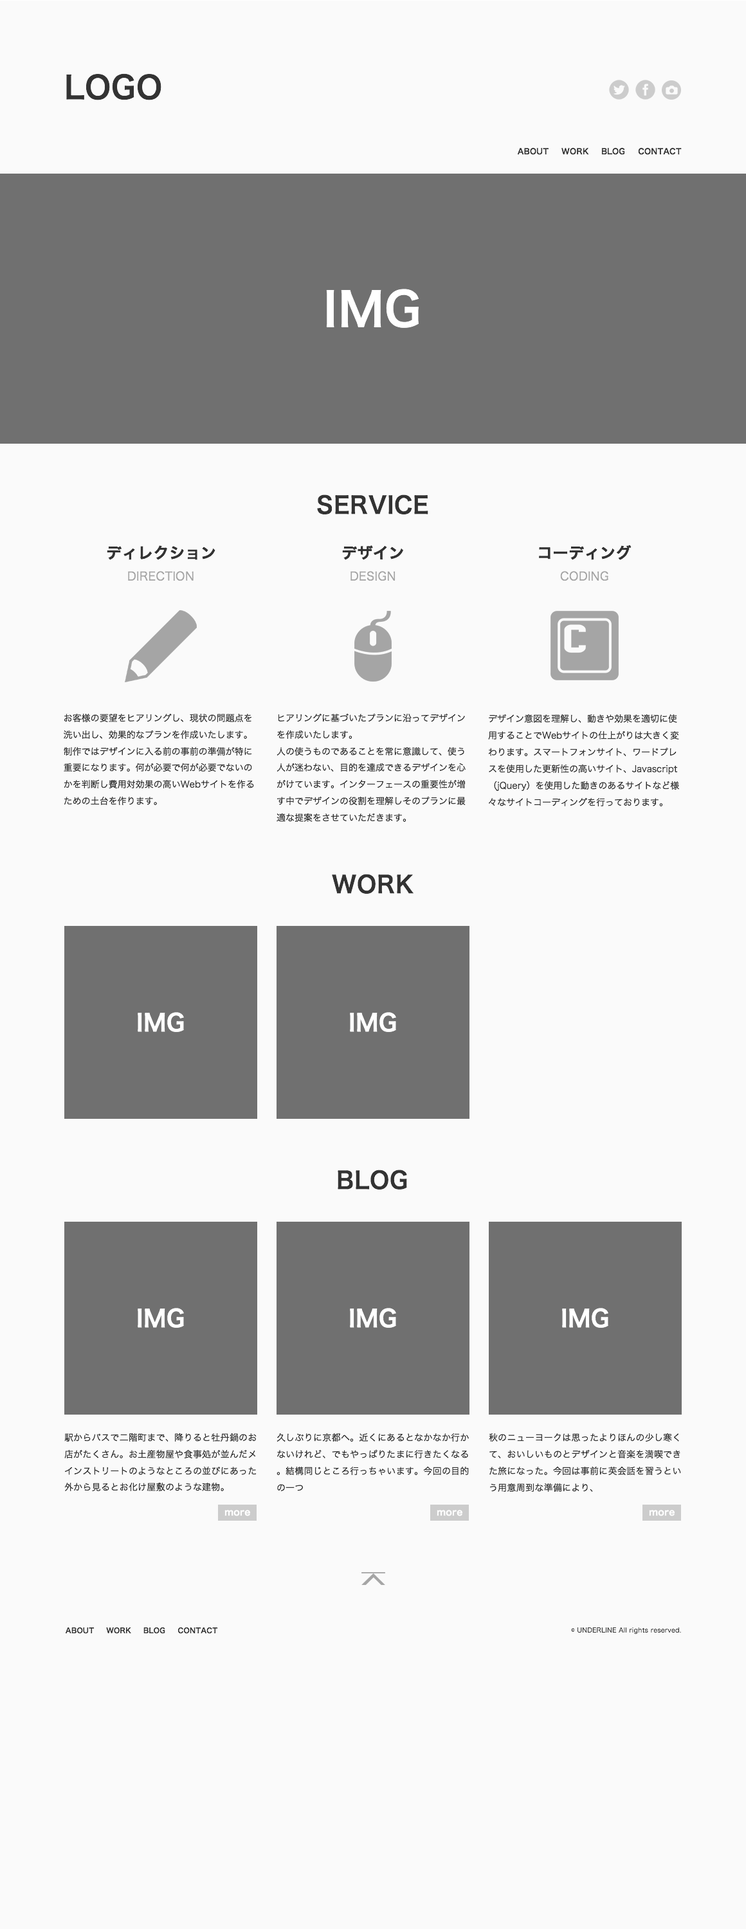
<style>
.page{position:relative;width:746px;height:1929px;background:#fafafa}
.page>*{position:absolute;margin:0}
.t1{font:30.9px "HiraKakuPro-W6";letter-spacing:0.02em;color:#333333}
.t2{font:7.7px "HiraKakuPro-W6";letter-spacing:0.02em;color:#333333}
.t3{font:46.3px "HiraKakuPro-W6";letter-spacing:0.02em;color:#ffffff}
.t4{font:23.1px "HiraKakuPro-W6";letter-spacing:0.02em;color:#333333}
.t5{font:15.4px "HiraKakuPro-W6";letter-spacing:0.02em;color:#333333}
.t6{font:11.6px "HiraKakuPro-W3";letter-spacing:0.02em;color:#a5a5a5}
.t7{font:9px "HiraKakuPro-W3";color:#333333}
.t8{font:9px "HiraKakuPro-W3";letter-spacing:0.02em;color:#333333}
.t9{font:7.1px "HiraKakuPro-W6";letter-spacing:0.02em;color:#333333}
.t10{font:6.4px "HiraKakuPro-W3";letter-spacing:0.02em;color:#333333}
</style>
<div class="page">
<p class="t1" style="left:66px;top:73px;width:95px;height:27px">LOGO</p>
<p class="t2" style="left:517px;top:148px;width:31px;height:7px">ABOUT</p>
<p class="t2" style="left:561px;top:148px;width:28px;height:7px">WORK</p>
<p class="t2" style="left:601px;top:148px;width:24px;height:7px">BLOG</p>
<p class="t2" style="left:638px;top:148px;width:43px;height:7px">CONTACT</p>
<p class="t3" style="left:326px;top:289px;width:93px;height:39px">IMG</p>
<p class="t4" style="left:317px;top:494px;width:111px;height:20px">SERVICE</p>
<p class="t5" style="left:107px;top:545px;width:108px;height:15px">ディレクション</p>
<p class="t5" style="left:342px;top:545px;width:61px;height:15px">デザイン</p>
<p class="t5" style="left:539px;top:544px;width:92px;height:16px">コーディング</p>
<p class="t6" style="left:128px;top:571px;width:66px;height:10px">DIRECTION</p>
<p class="t6" style="left:350px;top:571px;width:45px;height:10px">DESIGN</p>
<p class="t6" style="left:560px;top:571px;width:48px;height:10px">CODING</p>
<p class="t7" style="left:64px;top:713px;width:190px;height:93px">お客様の要望をヒアリングし、現状の問題点を洗い出し、効果的なプランを作成いたします。制作ではデザインに入る前の事前の準備が特に重要になります。何が必要で何が必要でないのかを判断し費用対効果の高いWebサイトを作るための土台を作ります。</p>
<p class="t7" style="left:276px;top:713px;width:189px;height:109px">ヒアリングに基づいたプランに沿ってデザインを作成いたします。<br>人の使うものであることを常に意識して、使う人が迷わない、目的を達成できるデザインを心がけています。インターフェースの重要性が増す中でデザインの役割を理解しそのプランに最適な提案をさせていただきます。</p>
<p class="t7" style="left:488px;top:714px;width:191px;height:92px">デザイン意図を理解し、動きや効果を適切に使用することでWebサイトの仕上がりは大きく変わります。スマートフォンサイト、ワードプレスを使用した更新性の高いサイト、Javascript（jQuery）を使用した動きのあるサイトなど様々なサイトコーディングを行っております。</p>
<p class="t4" style="left:332px;top:874px;width:81px;height:20px">WORK</p>
<p class="t4" style="left:338px;top:1169px;width:69px;height:20px">BLOG</p>
<p class="t8" style="left:64px;top:1432px;width:192px;height:59px">駅からバスで二階町まで、降りると牡丹鍋のお店がたくさん。お土産物屋や食事処が並んだメインストリートのようなところの並びにあった外から見るとお化け屋敷のような建物。</p>
<p class="t8" style="left:276px;top:1432px;width:193px;height:59px">久しぶりに京都へ。近くにあるとなかなか行かないけれど、でもやっぱりたまに行きたくなる。結構同じところ行っちゃいます。今回の目的の一つ</p>
<p class="t8" style="left:489px;top:1432px;width:192px;height:60px">秋のニューヨークは思ったよりほんの少し寒くて、おいしいものとデザインと音楽を満喫できた旅になった。今回は事前に英会話を習うという用意周到な準備により、</p>
<p class="t9" style="left:65px;top:1626px;width:29px;height:8px">ABOUT</p>
<p class="t9" style="left:106px;top:1626px;width:25px;height:8px">WORK</p>
<p class="t9" style="left:143px;top:1626px;width:22px;height:8px">BLOG</p>
<p class="t9" style="left:177px;top:1626px;width:41px;height:8px">CONTACT</p>
<p class="t10" style="left:571px;top:1627px;width:110px;height:7px">© UNDERLINE All rights reserved.</p>
</div>
